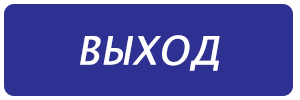
<style>
.page{position:relative;width:300px;height:100px;background:#2e3192}
.page>*{position:absolute;margin:0}
.t1{font:39px "LucidaSansUnicode";color:#ffffff;text-transform:uppercase;font-weight:bold;font-style:italic}
.t2{font:18px "Tahoma";color:#ffffff}
</style>
<div class="page">
<p class="t1" style="left:80px;top:35px;width:140px;height:36px"><span class="t2"><br></span>ВЫХОД</p>
</div>
